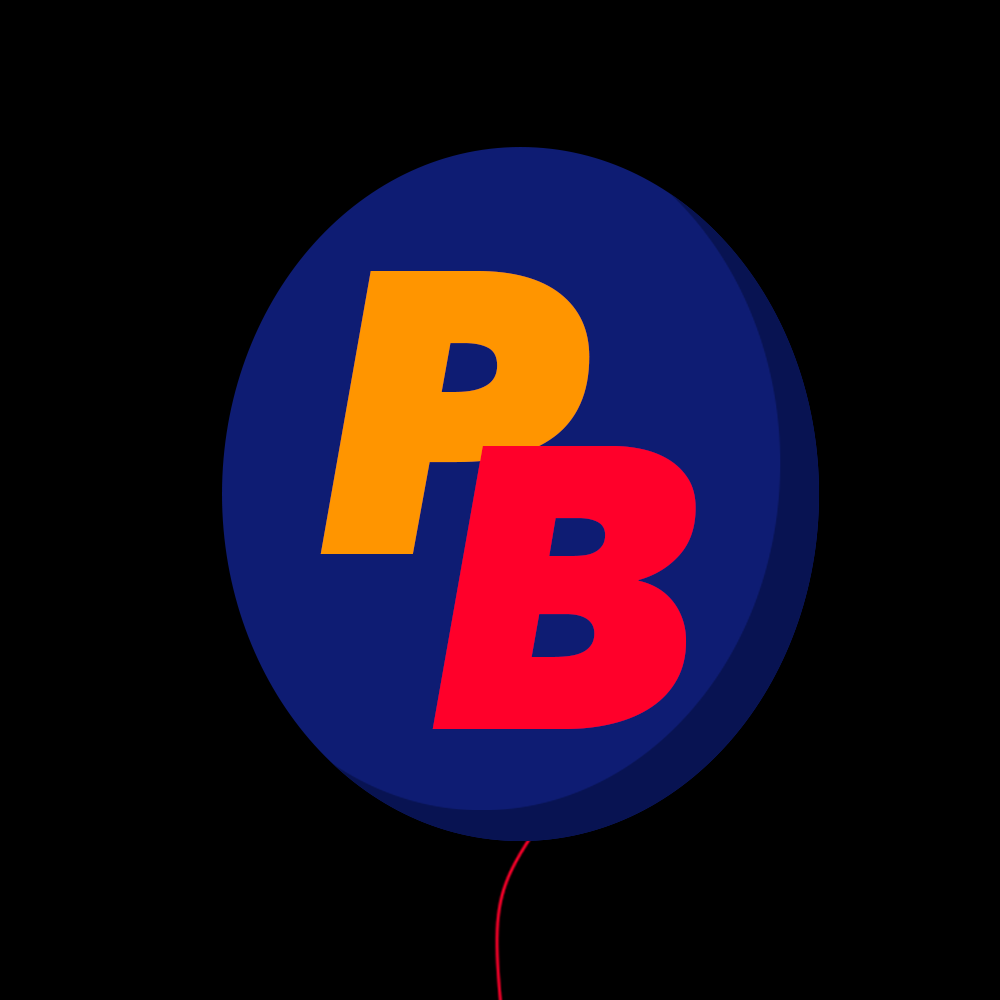
<style>
.page{position:relative;width:1000px;height:1000px;background:#000000}
.page>*{position:absolute;margin:0}
.t1{font:400px "AvenirNext-HeavyItalic";color:#ff9500}
.t2{font:400px "AvenirNext-HeavyItalic";color:#ff002a}
</style>
<div class="page">
<p class="t1" style="left:320px;top:271px;width:270px;height:283px">P</p>
<p class="t2" style="left:432px;top:446px;width:264px;height:283px">B</p>
</div>
